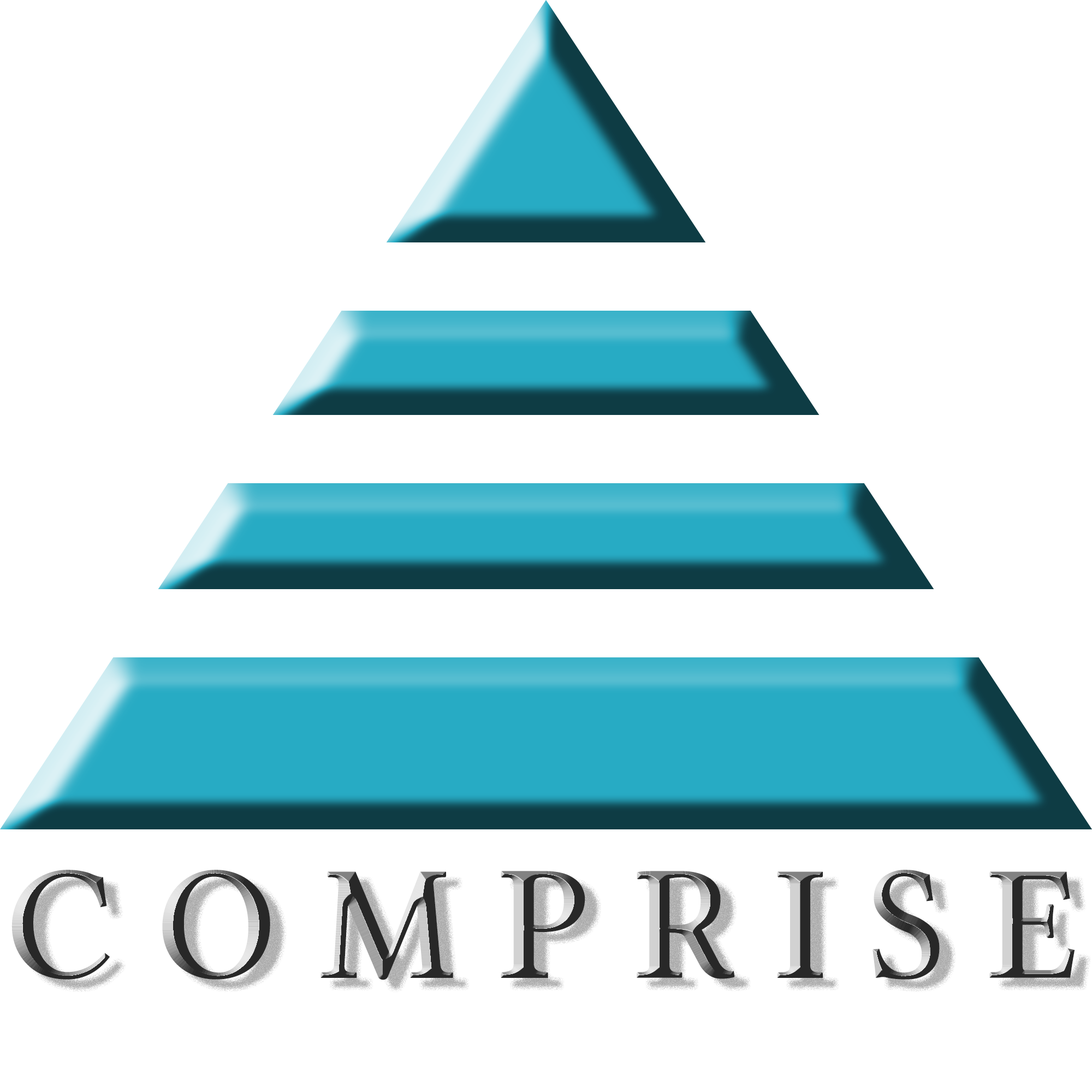
<style>
.page{position:relative;width:1092px;height:1092px;background:#ffffff}
.page>*{position:absolute;margin:0}
.t1{font:163.8px "LinuxLibertineGZ";letter-spacing:0.25em}
</style>
<div class="page">
<p class="t1" style="left:11px;top:870px;width:1064px;height:110px">COMPRISE</p>
</div>
